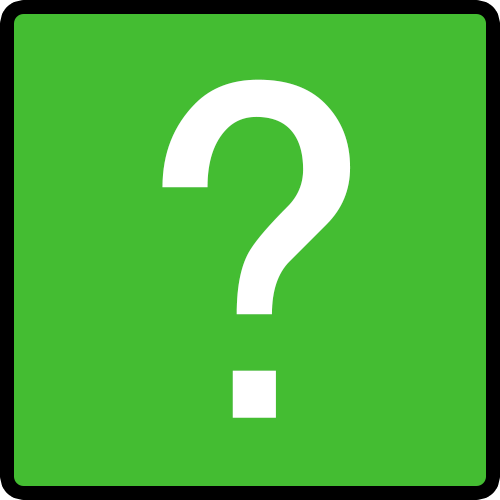
<style>
.page{position:relative;width:500px;height:500px;background:#44bd32}
.page>*{position:absolute;margin:0}
.t1{font:500px "MS-UIGothic";color:#ffffff}
</style>
<div class="page">
<p class="t1" style="left:162px;top:79px;width:189px;height:339px">?</p>
</div>
